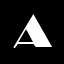
<style>
.page{position:relative;width:64px;height:64px;background:#000000}
.page>*{position:absolute;margin:0}
.t1{font:48px "Broadway";color:#fefefe}
</style>
<div class="page">
<p class="t1" style="left:13px;top:14px;width:39px;height:34px">A</p>
</div>
